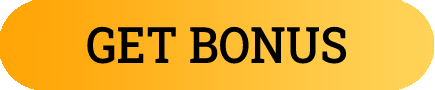
<style>
.page{position:relative;width:435px;height:90px}
.page>*{position:absolute;margin:0}
.t1{font:50.2px "RobotoSlab-Medium";color:#000000;scale:0.91 1}
</style>
<div class="page">
<p class="t1" style="left:87px;top:26px;width:260px;height:38px">GET BONUS</p>
</div>
